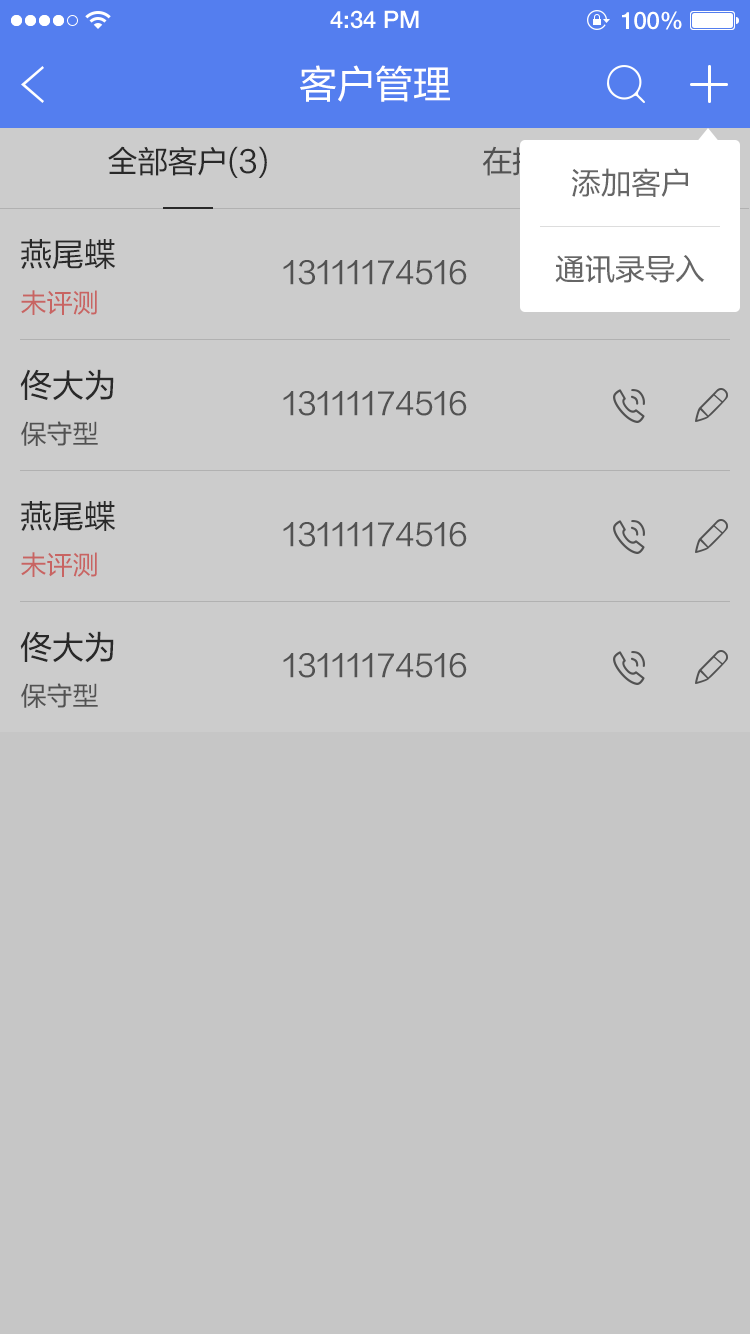
<style>
.page{position:relative;width:750px;height:1334px;background:#c6c6c6}
.page>*{position:absolute;margin:0}
.t1{font:24px "HelveticaNeueLTPro-Md";color:#ffffff}
.t2{font:38px "FZLTHJW-GB1-0";color:#ffffff}
.t3{font:30.2px "FZLTHJW-GB1-0";color:#333333}
.t4{font:30px "FZLTHJW-GB1-0";color:#666666}
.t5{font:32px "FZLTHJW-GB1-0";color:#333333}
.t6{font:26px "FZLTHJW-GB1-0";color:#c86462}
.t7{font:26px "FZLTHJW-GB1-0";color:#666666}
</style>
<div class="page">
<p class="t1" style="left:330px;top:10px;width:89px;height:19px">4:34 PM</p>
<p class="t1" style="left:622px;top:11px;width:60px;height:19px">100%</p>
<p class="t2" style="left:300px;top:65px;width:150px;height:37px">客户管理</p>
<p class="t3" style="left:108px;top:146px;width:159px;height:32px">全部客户(3)</p>
<p class="t4" style="left:571px;top:168px;width:117px;height:29px">添加客户</p>
<p class="t5" style="left:21px;top:239px;width:95px;height:31px">燕尾蝶</p>
<p class="t4" style="left:555px;top:255px;width:150px;height:28px">通讯录导入</p>
<p class="t4" style="left:283px;top:260px;width:184px;height:25px">13111174516</p>
<p class="t6" style="left:21px;top:290px;width:76px;height:25px">未评测</p>
<p class="t5" style="left:20px;top:369px;width:94px;height:32px">佟大为</p>
<p class="t4" style="left:283px;top:391px;width:184px;height:25px">13111174516</p>
<p class="t7" style="left:21px;top:421px;width:77px;height:25px">保守型</p>
<p class="t5" style="left:21px;top:501px;width:95px;height:31px">燕尾蝶</p>
<p class="t4" style="left:283px;top:522px;width:184px;height:25px">13111174516</p>
<p class="t6" style="left:21px;top:552px;width:76px;height:25px">未评测</p>
<p class="t5" style="left:20px;top:631px;width:94px;height:32px">佟大为</p>
<p class="t4" style="left:283px;top:653px;width:184px;height:25px">13111174516</p>
<p class="t7" style="left:21px;top:683px;width:77px;height:25px">保守型</p>
</div>
